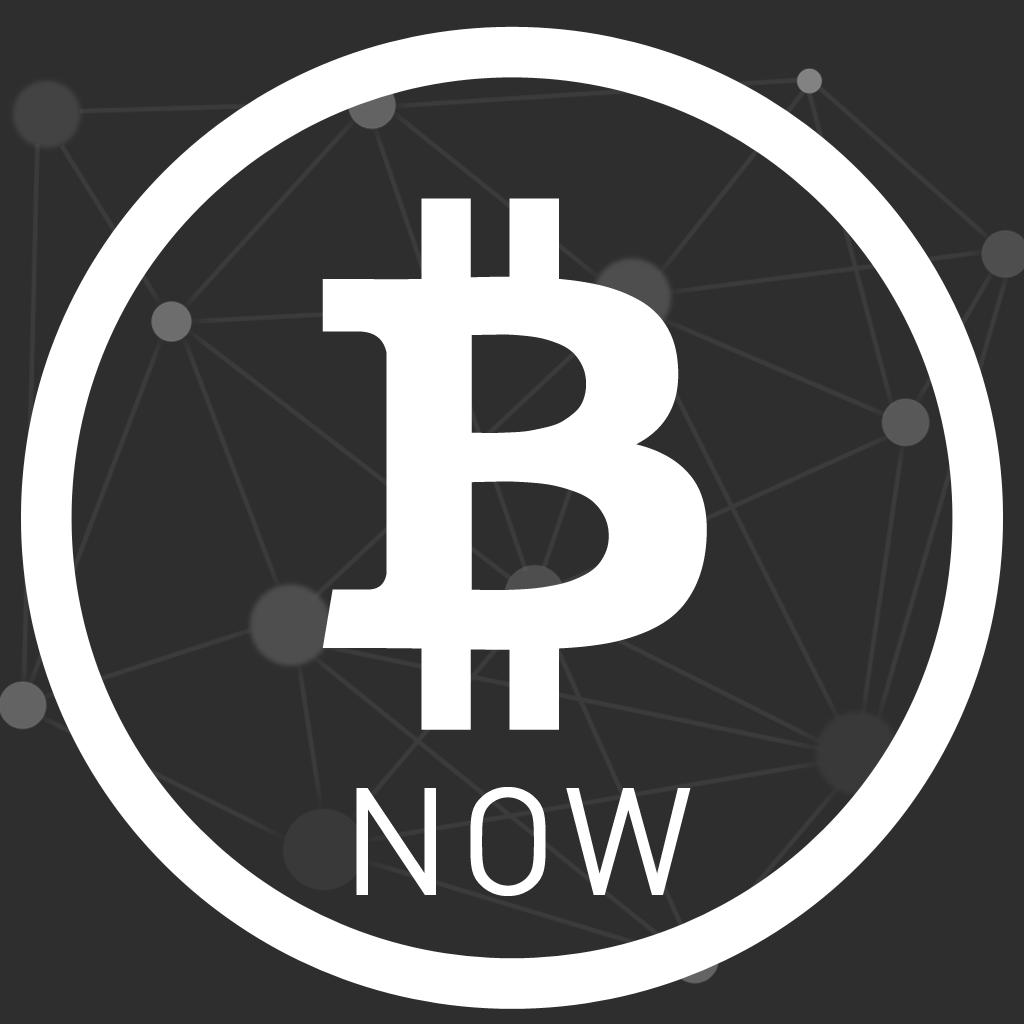
<style>
.page{position:relative;width:1024px;height:1024px;background:#2e2e2e}
.page>*{position:absolute;margin:0}
.t1{font:150.7px "DINPro-Regular";letter-spacing:0.05em;color:#ffffff}
</style>
<div class="page">
<p class="t1" style="left:356px;top:787px;width:335px;height:109px">NOW</p>
</div>
